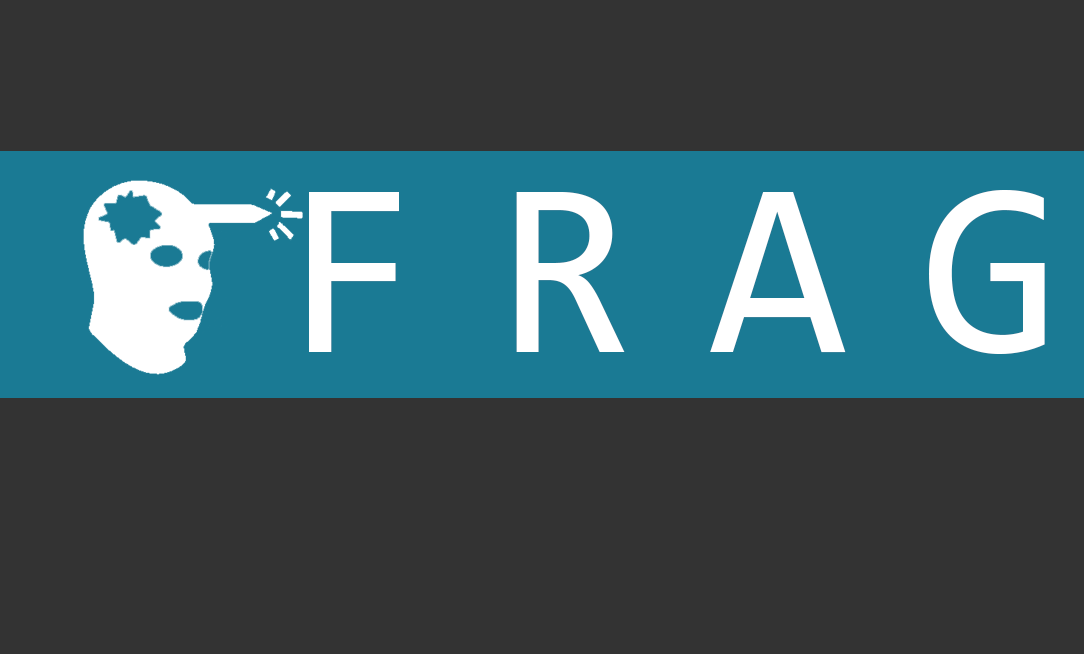
<style>
.page{position:relative;width:1084px;height:654px;background:#333333}
.page>*{position:absolute;margin:0}
.t1{font:250px "Consolas";letter-spacing:0.3em;color:#ffffff}
</style>
<div class="page">
<p class="t1" style="left:309px;top:190px;width:736px;height:164px">FRAG</p>
</div>
